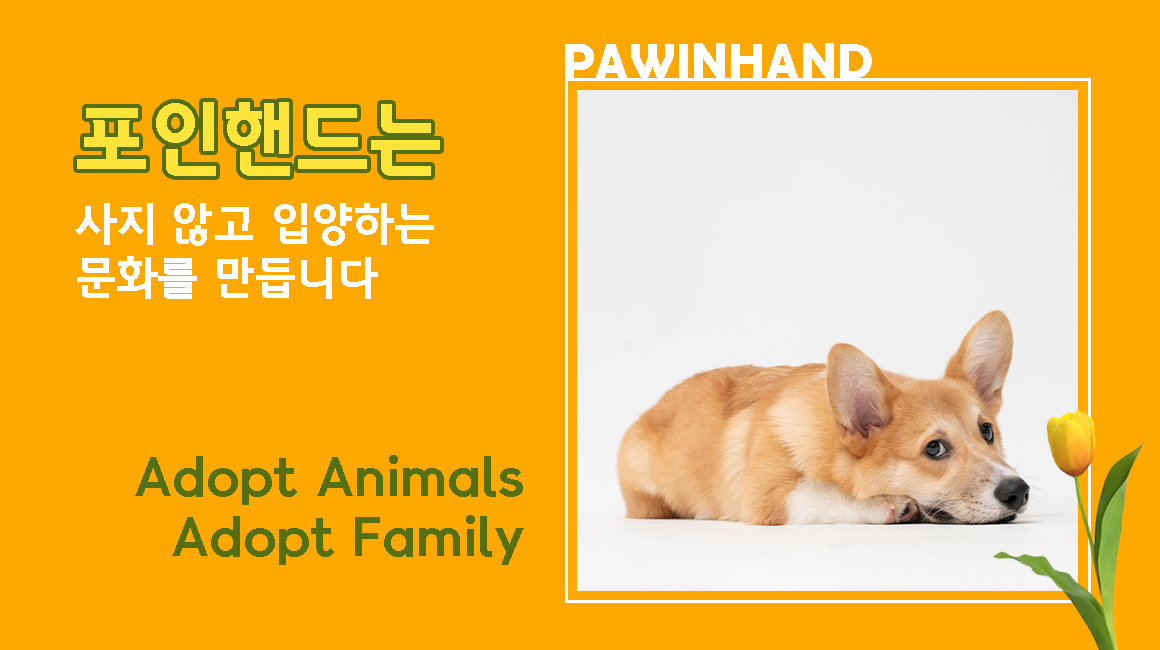
<style>
.page{position:relative;width:1160px;height:650px;background:#ffa800}
.page>*{position:absolute;margin:0}
.t1{font:50px "BerlinSansFBDemi-Bold";letter-spacing:-0.002em;color:#ffffff}
.t2{font:80px "GoyangDeogyangEB-Regular";letter-spacing:-0.002em;color:#ffe43a}
.t3{font:45px "GoyangDeogyangEB-Regular";letter-spacing:-0.002em;color:#ffffff}
.t4{font:50px "GoyangDeogyangEB-Regular";letter-spacing:-0.002em;color:#557012}
</style>
<div class="page">
<p class="t1" style="left:565px;top:43px;width:307px;height:35px">PAWINHAND</p>
<p class="t2" style="left:77px;top:102px;width:363px;height:74px">포인핸드는</p>
<p class="t3" style="left:75px;top:203px;width:359px;height:96px">사지 않고 입양하는<br>문화를 만듭니다</p>
<p class="t4" style="left:135px;top:455px;width:389px;height:110px;text-align:right">Adopt Animals<br>Adopt Family</p>
</div>
